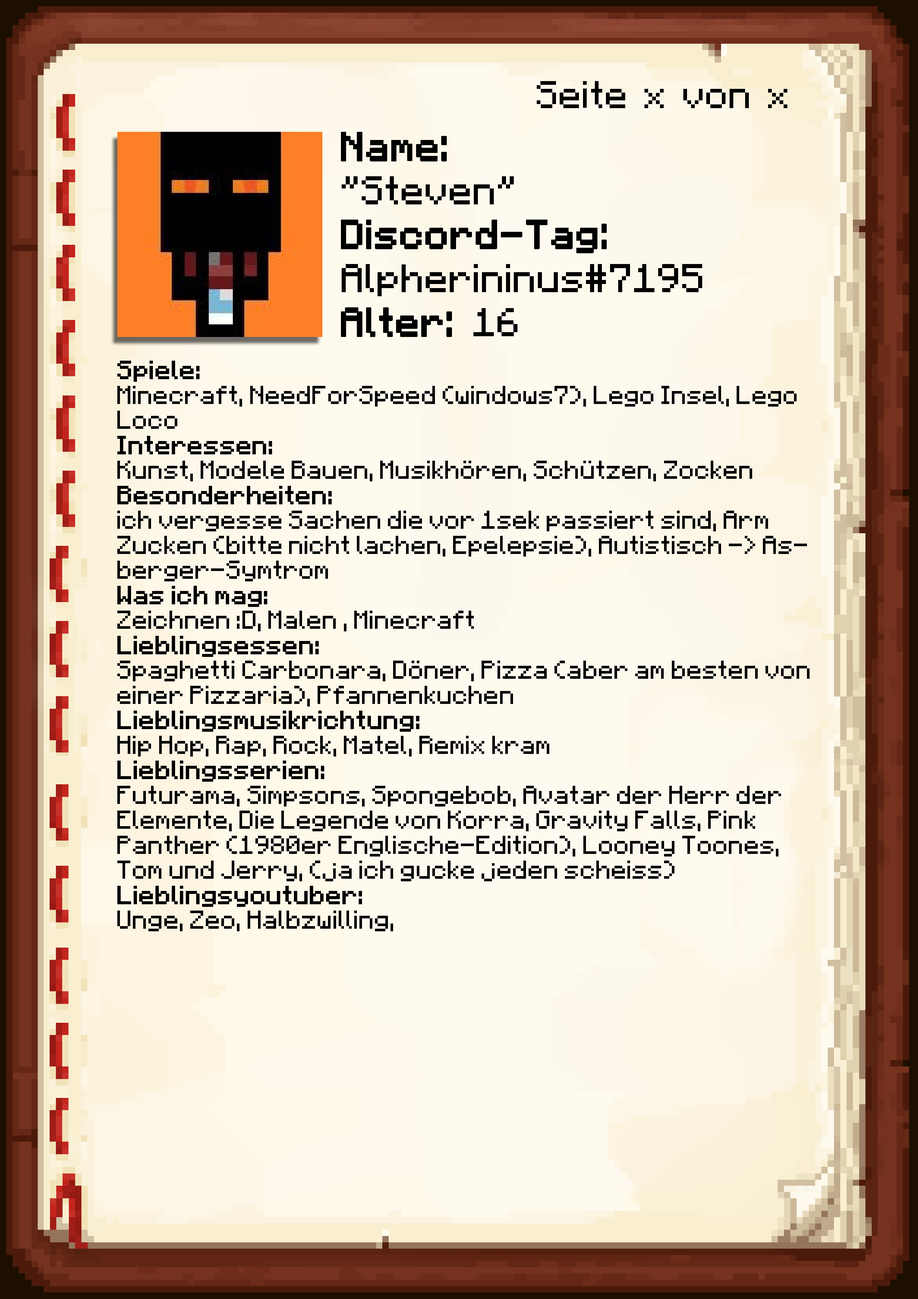
<style>
.page{position:relative;width:918px;height:1299px}
.page>*{position:absolute;margin:0}
.t1{font:38.6px "Minecraft-Regular";color:#000000}
.t2{font:40.1px/43.9px "Minecraft-Regular";color:#000000}
.t3{font:40.1px/43.9px "Minecraft-Regular";color:#000000;font-weight:bold}
.t4{font:20.8px "Minecraft";color:#000000}
.t5{font:20.8px "Minecraft";color:#000000;font-weight:bold}
</style>
<div class="page">
<p class="t1" style="left:537px;top:81px;width:250px;height:27px">Seite x von x</p>
<p class="t2" style="left:341px;top:132px;width:361px;height:205px"><span class="t3">Name:<br></span>"Steven"<br><span class="t3">Discord-Tag:<br></span>Alpherininus#7195<br><span class="t3">Alter: </span>16</p>
<p class="t4" style="left:117px;top:361px;width:693px;height:570px"><span class="t5">Spiele: <br></span>Minecraft, NeedForSpeed (windows7), Lego Insel, Lego Loco<br><span class="t5">Interessen:<br></span>Kunst, Modele Bauen, Musikhören, Schützen, Zocken<br><span class="t5">Besonderheiten:<br></span>ich vergesse Sachen die vor 1sek passiert sind, Arm Zucken (bitte nicht lachen, Epelepsie), Autistisch -&gt; Asberger-Symtrom <br><span class="t5">Was ich mag:<br></span>Zeichnen :D, Malen , Minecraft<br><span class="t5">Lieblingsessen:<br></span>Spaghetti Carbonara, Döner, Pizza (aber am besten von einer Pizzaria), Pfannenkuchen<br><span class="t5">Lieblingsmusikrichtung:<br></span>Hip Hop, Rap, Rock, Matel, Remix kram<br><span class="t5">Lieblingsserien:<br></span>Futurama, Simpsons, Spongebob, Avatar der Herr der Elemente, Die Legende von Korra, Gravity Falls, Pink Panther (1980er Englische-Edition), Looney Toones, Tom und Jerry, (ja ich gucke jeden scheiss)<br><span class="t5">Lieblingsyoutuber:<br></span>Unge, Zeo, Halbzwilling,</p>
</div>
